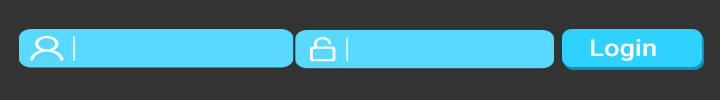
<style>
.page{position:relative;width:720px;height:100px;background:#333333}
.page>*{position:absolute;margin:0}
.t1{font:23.1px "Roboto-Medium";color:#ffffff;scale:1.18 1}
</style>
<div class="page">
<p class="t1" style="left:591px;top:39px;width:65px;height:22px">Login</p>
</div>
